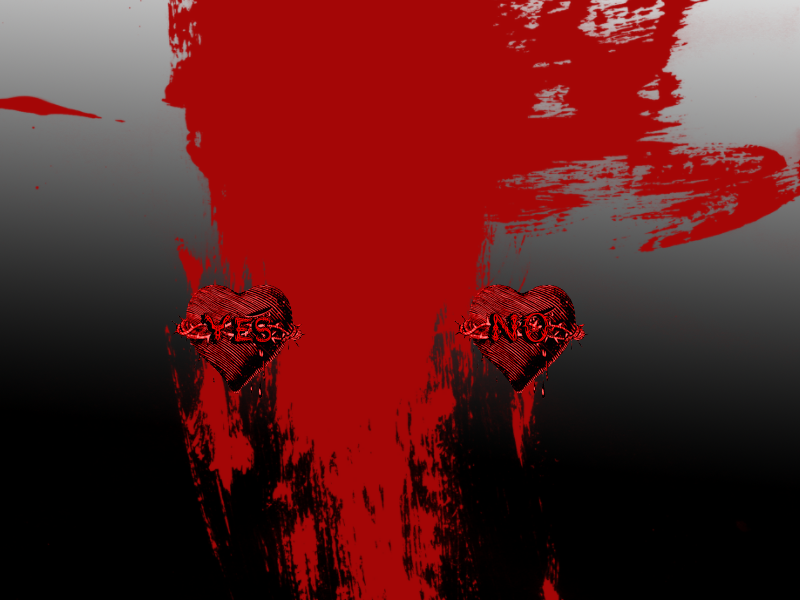
<style>
.page{position:relative;width:800px;height:600px;background:#a40606}
.page>*{position:absolute;margin:0}
.t1{font:36px "LupusBlight";color:#ff0000}
</style>
<div class="page">
<p class="t1" style="left:204px;top:313px;width:67px;height:29px">Yes</p>
<p class="t1" style="left:491px;top:312px;width:60px;height:30px">NO</p>
</div>
